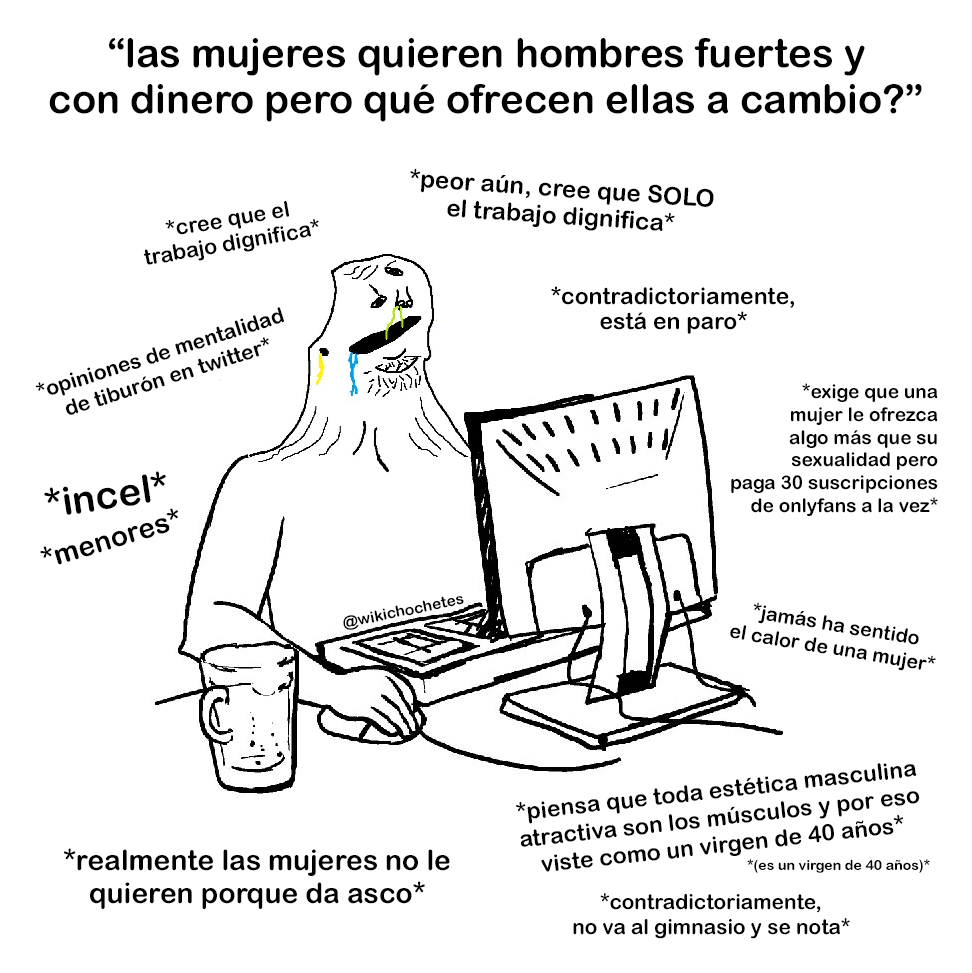
<style>
.page{position:relative;width:972px;height:973px;background:#ffffff}
.page>*{position:absolute;margin:0}
.t1{font:40px "ArialRoundedMTBold";color:#000000}
.t2{font:24.2px "ArialRoundedMTBold";color:#000000}
.t3{font:21.5px "ArialRoundedMTBold";color:#000000}
.t4{font:22.9px "ArialRoundedMTBold";color:#000000}
.t5{font:21px "ArialRoundedMTBold";color:#000000}
.t6{font:19.1px "ArialRoundedMTBold";color:#000000}
.t7{font:38.6px "ArialRoundedMTBold";color:#000000}
.t8{font:28.3px "ArialRoundedMTBold";color:#000000}
.t9{font:15.6px "ArialRoundedMTBold";color:#000000}
.t10{font:19.6px "ArialRoundedMTBold";color:#000000}
.t11{font:23px "ArialRoundedMTBold";color:#000000}
.t12{font:14.1px "ArialRoundedMTBold";color:#000000}
.t13{font:20.8px "ArialRoundedMTBold";color:#000000}
</style>
<div class="page">
<p class="t1" style="left:49px;top:38px;width:873px;height:84px;text-align:center">“las mujeres quieren hombres fuertes y<br>con dinero pero qué ofrecen ellas a cambio?”</p>
<p class="t2" style="left:410px;top:168px;width:304px;height:63px;text-align:center;rotate:4deg">*peor aún, cree que SOLO<br>el trabajo dignifica*</p>
<p class="t3" style="left:143px;top:201px;width:176px;height:64px;text-align:center;rotate:-10deg">*cree que el<br>trabajo dignifica*</p>
<p class="t4" style="left:551px;top:286px;width:243px;height:48px;text-align:center">*contradictoriamente,<br>está en paro*</p>
<p class="t5" style="left:35px;top:307px;width:249px;height:108px;text-align:center;rotate:-18deg">*opiniones de mentalidad<br>de tiburón en twitter*</p>
<p class="t6" style="left:731px;top:383px;width:207px;height:133px;text-align:right">*exige que una<br>mujer le ofrezca<br>algo más que su<br>sexualidad pero<br>paga 30 suscripciones<br>de onlyfans a la vez*</p>
<p class="t7" style="left:44px;top:471px;width:122px;height:44px;rotate:-9deg">*incel*</p>
<p class="t8" style="left:40px;top:508px;width:138px;height:57px;rotate:-17deg">*menores*</p>
<p class="t9" style="left:343px;top:596px;width:121px;height:34px;rotate:-11deg">@wikichochetes</p>
<p class="t10" style="left:730px;top:602px;width:206px;height:69px;text-align:center;rotate:9deg">*jamás ha sentido<br>el calor de una mujer*</p>
<p class="t11" style="left:516px;top:763px;width:404px;height:109px;text-align:center;rotate:-6deg">*piensa que toda estética masculina<br>atractiva son los músculos y por eso<br>viste como un virgen de 40 años*</p>
<p class="t8" style="left:64px;top:848px;width:386px;height:61px;text-align:center">*realmente las mujeres no le<br>quieren porque da asco*</p>
<p class="t12" style="left:747px;top:859px;width:183px;height:14px">*(es un virgen de 40 años)*</p>
<p class="t13" style="left:573px;top:893px;width:277px;height:46px;text-align:center">*contradictoriamente,<br>no va al gimnasio y se nota*</p>
</div>
